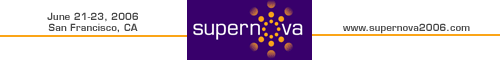
<style>
.page{position:relative;width:500px;height:60px;background:#ffffff}
.page>*{position:absolute;margin:0}
.t1{font:9.5px/11px "Eurostile-Demi";letter-spacing:0.02em;color:#484848}
.t2{font:9.5px "Eurostile-Demi";letter-spacing:0.02em;color:#484848}
</style>
<div class="page">
<p class="t1" style="left:47px;top:12px;width:91px;height:21px;text-align:center">June 21-23, 2006<br>San Francisco, CA</p>
<p class="t2" style="left:343px;top:23px;width:127px;height:11px">www.supernova2006.com</p>
</div>
